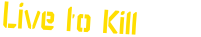
<style>
.page{position:relative;width:201px;height:37px;background:#ffffff}
.page>*{position:absolute;margin:0}
.t1{font:24px "KarismaStencil";color:#ffde01;scale:1.5 1}
</style>
<div class="page">
<p class="t1" style="left:3px;top:1px;width:134px;height:34px;rotate:4deg">Live to Kill</p>
</div>
